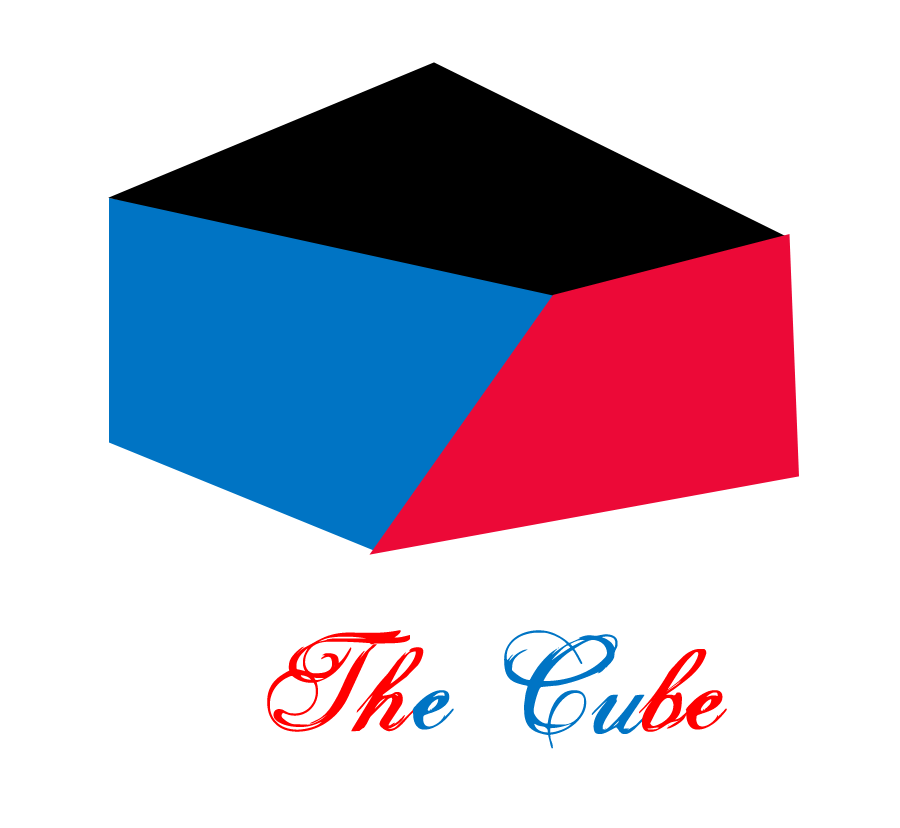
<style>
.page{position:relative;width:900px;height:828px;background:#ffffff}
.page>*{position:absolute;margin:0}
.t1{font:150px "Selfish";color:#ff0000}
.t2{font:150px "Selfish";color:#0074c4}
</style>
<div class="page">
<p class="t1" style="left:267px;top:630px;width:460px;height:119px">&lt;&lt;Th<span class="t2">e Cu</span>be</p>
</div>
